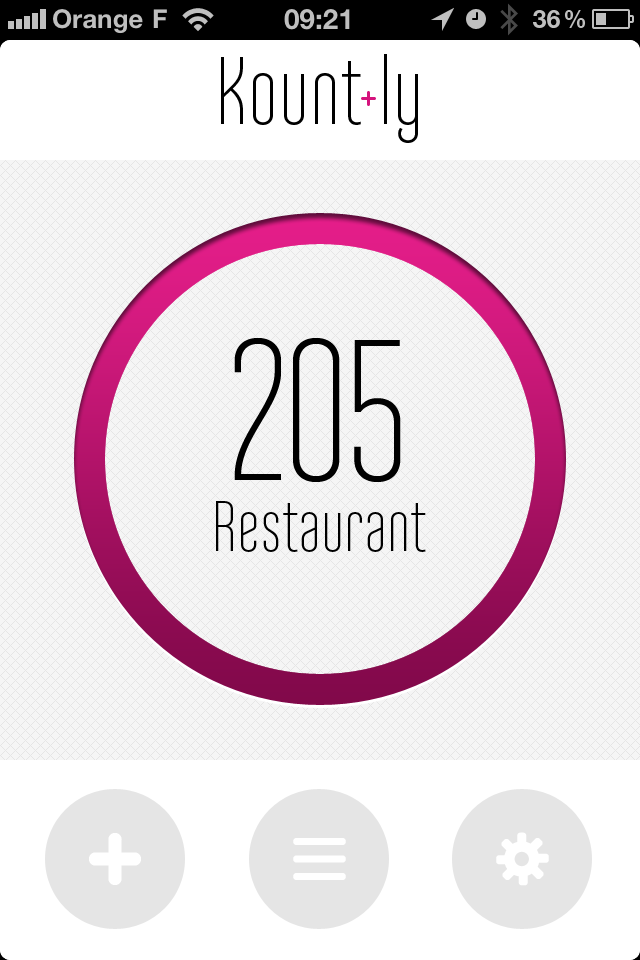
<style>
.page{position:relative;width:640px;height:960px;background:#f5f5f5}
.page>*{position:absolute;margin:0}
.t1{font:95px "AndoLight";color:#000000}
.t2{font:200px "AndoLight";letter-spacing:-0.05em;color:#000000}
.t3{font:72px "AndoLight";color:#000000}
</style>
<div class="page">
<p class="t1" style="left:221px;top:54px;width:197px;height:89px">Kount ly</p>
<p class="t2" style="left:234px;top:338px;width:167px;height:144px">205</p>
<p class="t3" style="left:216px;top:501px;width:210px;height:51px">Restaurant</p>
</div>
